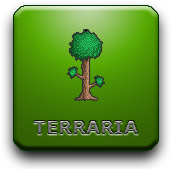
<style>
.page{position:relative;width:172px;height:169px}
.page>*{position:absolute;margin:0}
.t1{font:18px "Verdana-Bold"}
</style>
<div class="page">
<p class="t1" style="left:34px;top:121px;width:104px;height:13px">TERRARIA</p>
</div>
